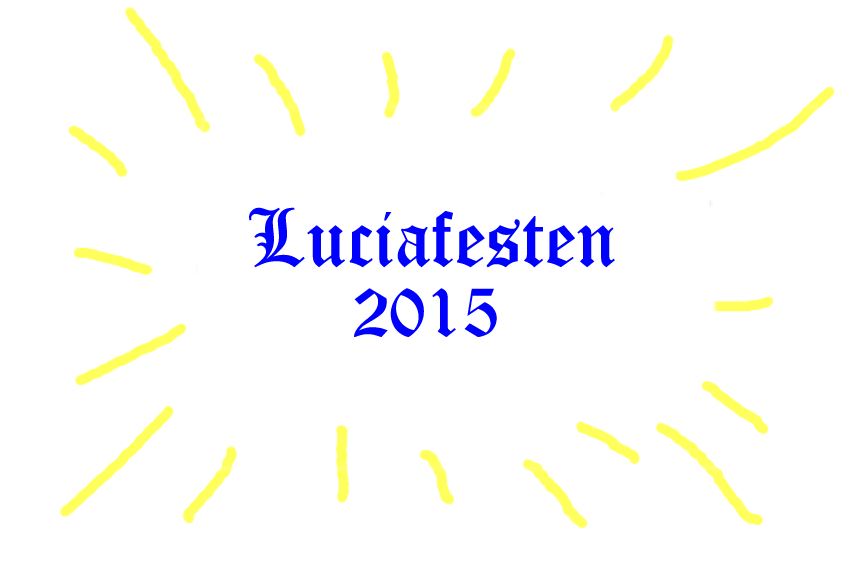
<style>
.page{position:relative;width:850px;height:567px;background:#ffffff}
.page>*{position:absolute;margin:0}
.t1{font:80px "OldEnglishTextMT";color:#0000ff}
.t2{font:72px "OldEnglishTextMT";color:#0000ff}
</style>
<div class="page">
<p class="t1" style="left:249px;top:207px;width:366px;height:61px">Luciafesten</p>
<p class="t2" style="left:354px;top:288px;width:143px;height:49px">2015</p>
</div>
